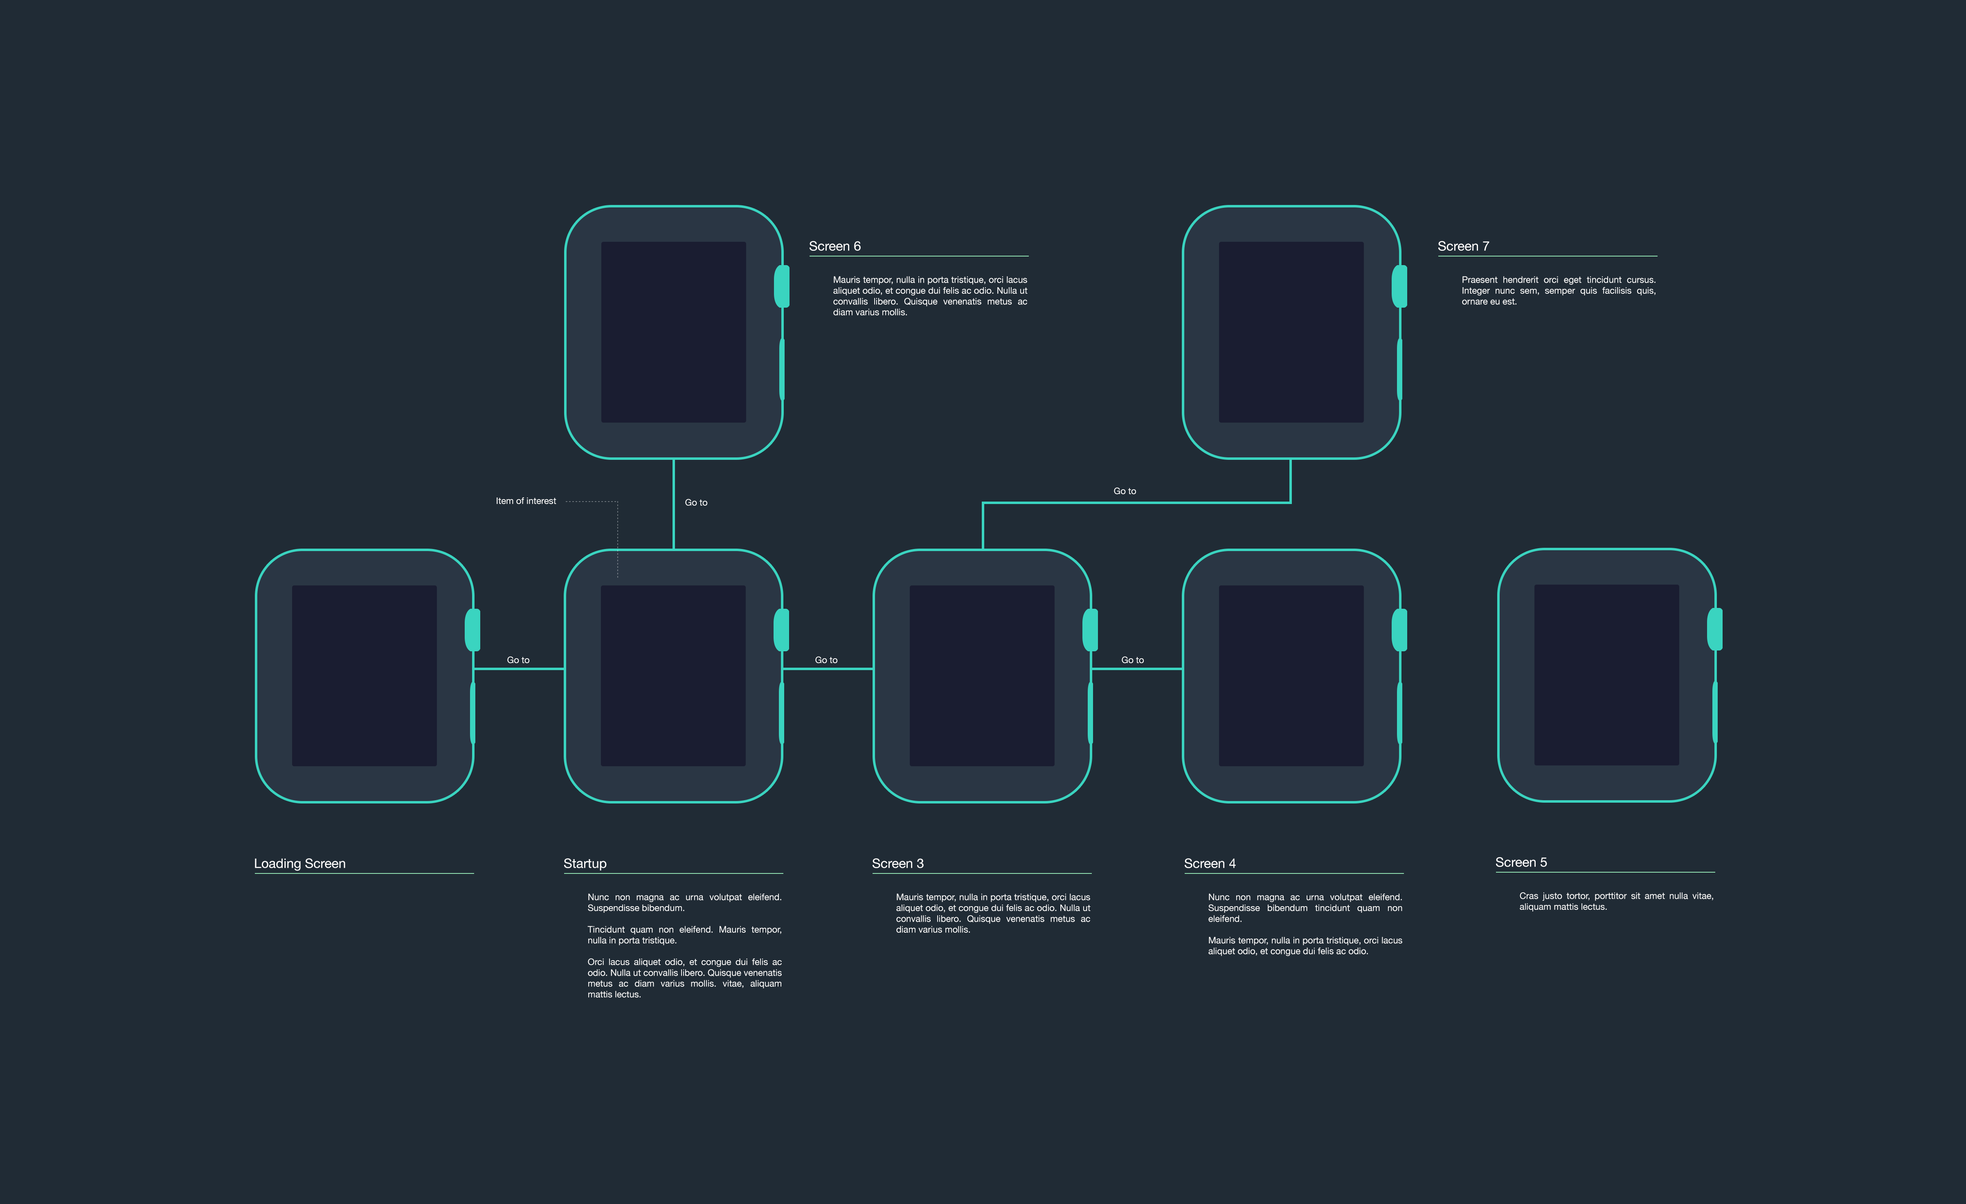
<style>
.page{position:relative;width:1966px;height:1204px;background:#202b35}
.page>*{position:absolute;margin:0}
.t1{font:13.1px "HelveticaNeue";color:#ffffff}
.t2{font:9px "HelveticaNeue";color:#ffffff}
</style>
<div class="page">
<p class="t1" style="left:810px;top:241px;width:51px;height:10px">Screen 6</p>
<p class="t1" style="left:1438px;top:241px;width:52px;height:10px">Screen 7</p>
<p class="t2" style="left:833px;top:276px;width:195px;height:39px;text-align:justify">Mauris tempor, nulla in porta tristique, orci lacus aliquet odio, et congue dui felis ac odio. Nulla ut convallis libero. Quisque venenatis metus ac diam varius mollis.</p>
<p class="t2" style="left:1462px;top:276px;width:194px;height:29px;text-align:justify">Praesent hendrerit orci eget tincidunt cursus. Integer nunc sem, semper quis facilisis quis, ornare eu est.</p>
<p class="t2" style="left:497px;top:497px;width:59px;height:7px">Item of interest</p>
<p class="t2" style="left:1114px;top:487px;width:22px;height:7px">Go to</p>
<p class="t2" style="left:685px;top:499px;width:22px;height:7px">Go to</p>
<p class="t2" style="left:507px;top:656px;width:22px;height:7px">Go to</p>
<p class="t2" style="left:815px;top:656px;width:22px;height:7px">Go to</p>
<p class="t2" style="left:1122px;top:656px;width:22px;height:7px">Go to</p>
<p class="t1" style="left:1496px;top:857px;width:51px;height:10px">Screen 5</p>
<p class="t1" style="left:255px;top:858px;width:90px;height:13px">Loading Screen</p>
<p class="t1" style="left:564px;top:858px;width:43px;height:13px">Startup</p>
<p class="t1" style="left:873px;top:858px;width:51px;height:10px">Screen 3</p>
<p class="t1" style="left:1185px;top:858px;width:51px;height:10px">Screen 4</p>
<p class="t2" style="left:587px;top:893px;width:195px;height:105px;text-align:justify">Nunc non magna ac urna volutpat eleifend. Suspendisse bibendum.<br><br>Tincidunt quam non eleifend. Mauris tempor, nulla in porta tristique. <br><br>Orci lacus aliquet odio, et congue dui felis ac odio. Nulla ut convallis libero. Quisque venenatis metus ac diam varius mollis. vitae, aliquam mattis lectus.</p>
<p class="t2" style="left:896px;top:893px;width:195px;height:40px;text-align:justify">Mauris tempor, nulla in porta tristique, orci lacus aliquet odio, et congue dui felis ac odio. Nulla ut convallis libero. Quisque venenatis metus ac diam varius mollis.</p>
<p class="t2" style="left:1208px;top:893px;width:194px;height:63px;text-align:justify">Nunc non magna ac urna volutpat eleifend. Suspendisse bibendum tincidunt quam non eleifend. <br><br>Mauris tempor, nulla in porta tristique, orci lacus aliquet odio, et congue dui felis ac odio.</p>
<p class="t2" style="left:1520px;top:892px;width:193px;height:19px;text-align:justify">Cras justo tortor, porttitor sit amet nulla vitae, aliquam mattis lectus.</p>
</div>
